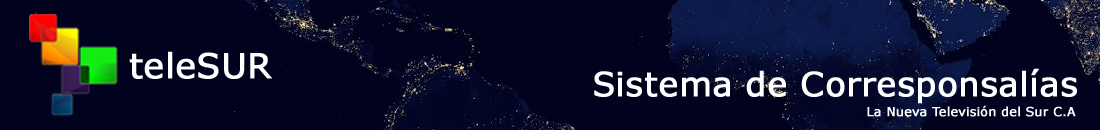
<style>
.page{position:relative;width:1100px;height:130px;background:#01021e}
.page>*{position:absolute;margin:0}
.t1{font:34.4px "Verdana";color:#ffffff;font-weight:bold}
.t2{font:33.3px "Verdana";color:#ffffff;font-weight:bold}
.t3{font:12.5px "Verdana";color:#ffffff;font-weight:bold}
</style>
<div class="page">
<p class="t1" style="left:129px;top:51px;width:143px;height:28px">teleSUR</p>
<p class="t2" style="left:594px;top:68px;width:483px;height:36px">Sistema de Corresponsalías</p>
<p class="t3" style="left:867px;top:105px;width:209px;height:12px">La Nueva Televisión del Sur C.A</p>
</div>
